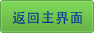
<style>
.page{position:relative;width:94px;height:33px}
.page>*{position:absolute;margin:0}
.t1{font:14px "AdobeHeitiStd-Regular";letter-spacing:0.025em;color:#003399}
</style>
<div class="page">
<p class="t1" style="left:12px;top:11px;width:71px;height:14px">返回主界面</p>
</div>
